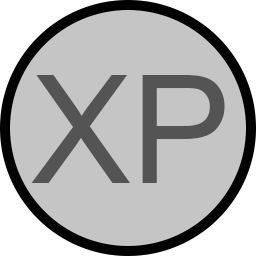
<style>
.page{position:relative;width:256px;height:256px;background:#c5c5c5}
.page>*{position:absolute;margin:0}
.t1{font:150px "ArialMT";color:#545454}
</style>
<div class="page">
<p class="t1" style="left:31px;top:75px;width:194px;height:108px">XP</p>
</div>
